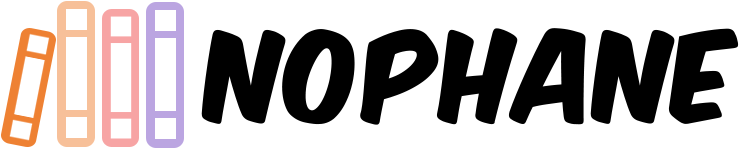
<style>
.page{position:relative;width:741px;height:149px;background:#ffffff}
.page>*{position:absolute;margin:0}
.t1{font:106.9px "KomikaAxis";color:#000000;font-weight:bold}
</style>
<div class="page">
<p class="t1" style="left:201px;top:28px;width:538px;height:97px">NOPHANE</p>
</div>
